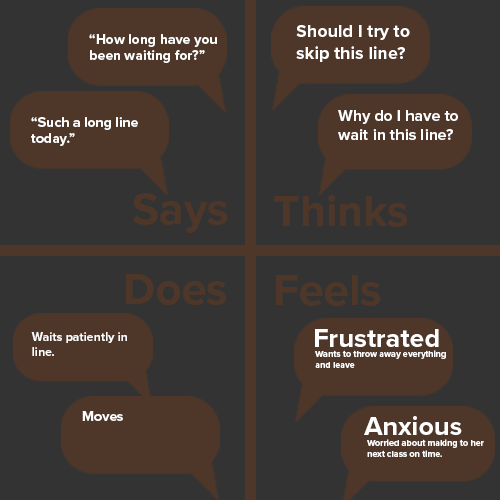
<style>
.page{position:relative;width:500px;height:500px;background:#333333}
.page>*{position:absolute;margin:0}
.t1{font:18px "ProximaNova-Bold";color:#ffffff}
.t2{font:14px "ProximaNova-Bold";color:#ffffff}
.t3{font:16px "ProximaNova-Bold";color:#ffffff}
.t4{font:45px "ProximaNova-Bold";color:#4e3629}
.t5{font:27px "ProximaNova-Bold";color:#ffffff}
.t6{font:12.3px "ProximaNova-Bold";color:#ffffff}
.t7{font:9px "ProximaNova-Bold";color:#ffffff}
</style>
<div class="page">
<p class="t1" style="left:296px;top:25px;width:114px;height:37px">Should I try to skip this line?</p>
<p class="t2" style="left:89px;top:34px;width:128px;height:29px">“How long have you been waiting for?”</p>
<p class="t3" style="left:338px;top:110px;width:120px;height:30px">Why do I have to wait in this line?</p>
<p class="t2" style="left:31px;top:117px;width:107px;height:29px">“Such a long line today.”</p>
<p class="t4" style="left:133px;top:193px;width:94px;height:40px">Says</p>
<p class="t4" style="left:274px;top:195px;width:133px;height:32px">Thinks</p>
<p class="t4" style="left:126px;top:274px;width:100px;height:31px">Does</p>
<p class="t4" style="left:276px;top:275px;width:104px;height:31px">Feels</p>
<p class="t5" style="left:315px;top:329px;width:124px;height:18px">Frustrated</p>
<p class="t6" style="left:31px;top:332px;width:96px;height:24px">Waits patiently in line.</p>
<p class="t7" style="left:315px;top:350px;width:131px;height:18px">Wants to throw away everything and leave</p>
<p class="t2" style="left:82px;top:411px;width:41px;height:10px">Moves</p>
<p class="t5" style="left:364px;top:416px;width:98px;height:19px">Anxious</p>
<p class="t7" style="left:367px;top:439px;width:117px;height:18px">Worried about making to her next class on time.</p>
</div>
